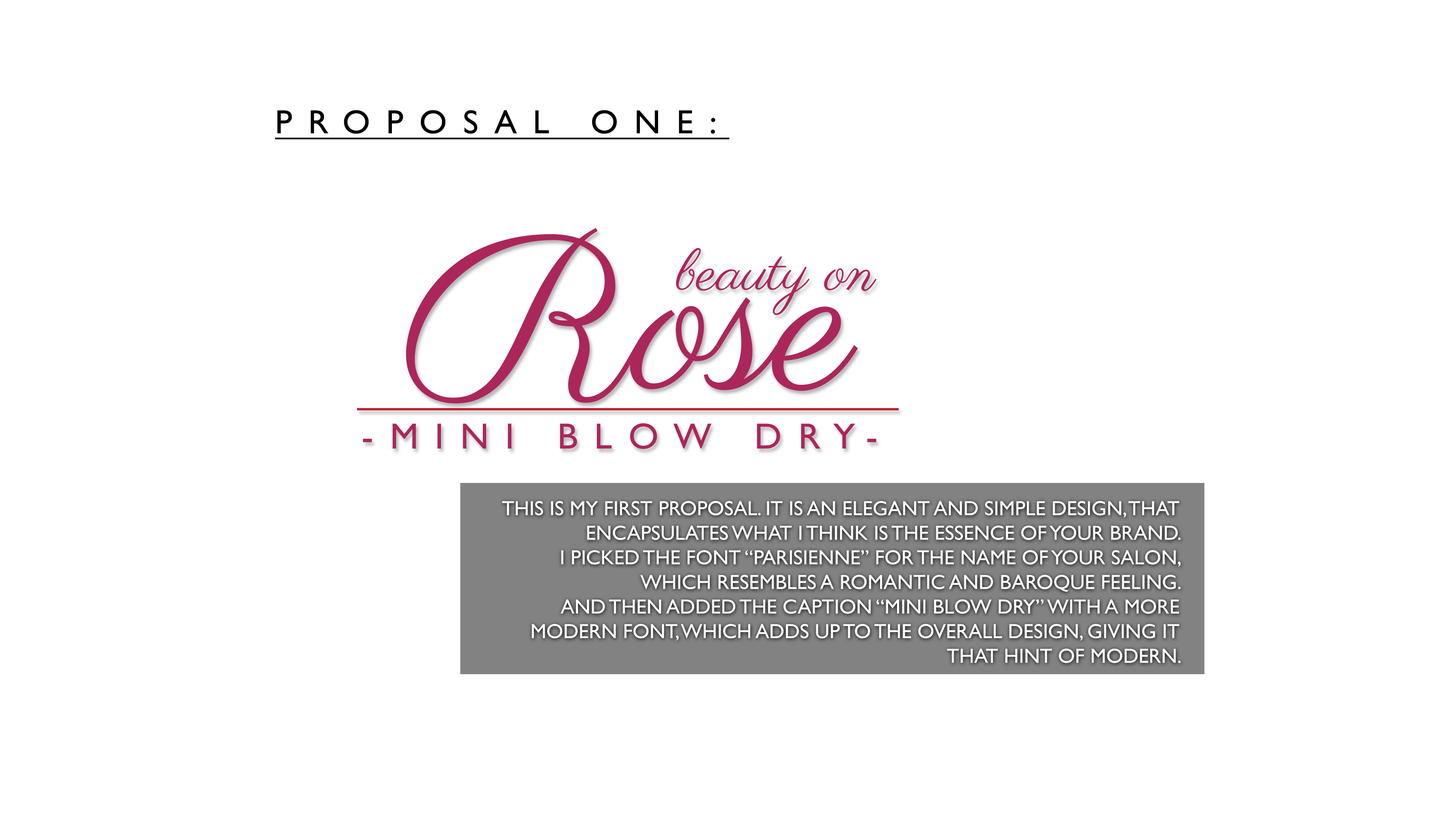
<style>
.page{position:relative;width:1456px;height:819px;background:#ffffff}
.page>*{position:absolute;margin:0}
.t1{font:33.6px "GillSans";letter-spacing:0.45em;color:#000000;text-transform:uppercase;font-weight:bold;text-decoration:underline}
.t2{font:20.5px "GillSans";color:#ffffff;text-transform:uppercase}
</style>
<div class="page">
<p class="t1" style="left:275px;top:110px;width:455px;height:30px">Proposal one:</p>
<p class="t2" style="left:502px;top:501px;width:679px;height:162px;text-align:right">This is my first proposal. It is an elegant and simple design, that encapsulates what I think is the essence of your brand.<br>I picked the font “Parisienne” for the name of your salon, which resembles a romantic and baroque feeling.<br>And then added the caption “Mini Blow Dry” with a more modern font, which adds up to the overall design, giving it that hint of modern.</p>
</div>
